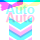
<style>
.page{position:relative;width:40px;height:40px;background:#ffffff}
.page>*{position:absolute;margin:0}
.t1{font:12.8px "Arial-BoldMT"}
</style>
<div class="page">
<p class="t1" style="left:5px;top:2px;width:30px;height:10px">Auto</p>
</div>
